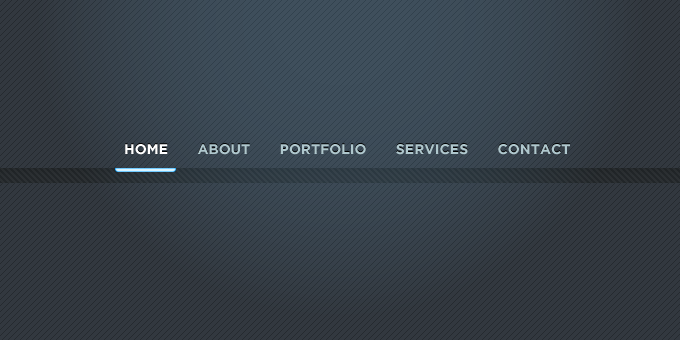
<style>
.page{position:relative;width:680px;height:340px;background:#32383f}
.page>*{position:absolute;margin:0}
.t1{font:14px "GothamBold";color:#afc7cd}
.t2{font:14px "GothamBold";color:#ffffff}
</style>
<div class="page">
<p class="t1" style="left:125px;top:144px;width:445px;height:11px"><span class="t2">HOME       </span>ABOUT       PORTFOLIO       SERVICES       CONTACT</p>
</div>
